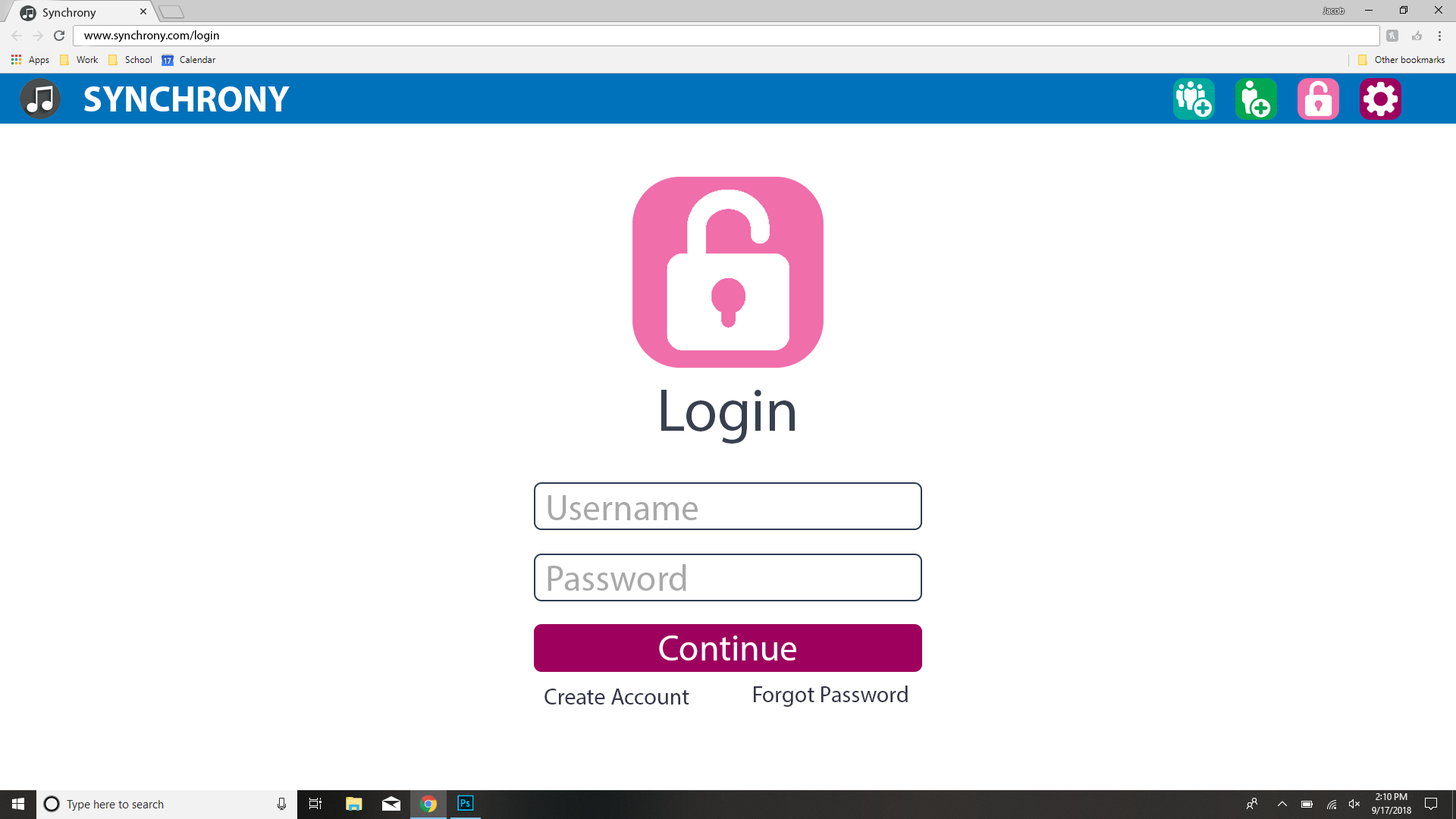
<style>
.page{position:relative;width:1456px;height:819px;background:#ffffff}
.page>*{position:absolute;margin:0}
.t1{font:12.1px "MyriadPro-Regular";color:#252525}
.t2{font:12.1px "MyriadPro-Regular";color:#000000}
.t3{font:36.4px "MyriadPro-Bold";color:#ffffff}
.t4{font:60.7px "MyriadPro-Regular";color:#384050}
.t5{font:36.4px "MyriadPro-Regular";color:#a9a9a9}
.t6{font:36.4px "MyriadPro-Regular";color:#ffffff}
.t7{font:22.7px "MyriadPro-Regular";color:#343549}
</style>
<div class="page">
<p class="t1" style="left:42px;top:8px;width:54px;height:12px">Synchrony</p>
<p class="t2" style="left:84px;top:30px;width:135px;height:12px">www.synchrony.com/login</p>
<p class="t3" style="left:84px;top:86px;width:206px;height:25px">SYNCHRONY</p>
<p class="t4" style="left:661px;top:390px;width:134px;height:54px">Login</p>
<p class="t5" style="left:548px;top:495px;width:150px;height:25px">Username</p>
<p class="t5" style="left:548px;top:564px;width:138px;height:27px">Password</p>
<p class="t6" style="left:659px;top:635px;width:137px;height:25px">Continue</p>
<p class="t7" style="left:544px;top:689px;width:145px;height:15px">Create Account</p>
<p class="t7" style="left:754px;top:686px;width:154px;height:21px">Forgot Password</p>
</div>
